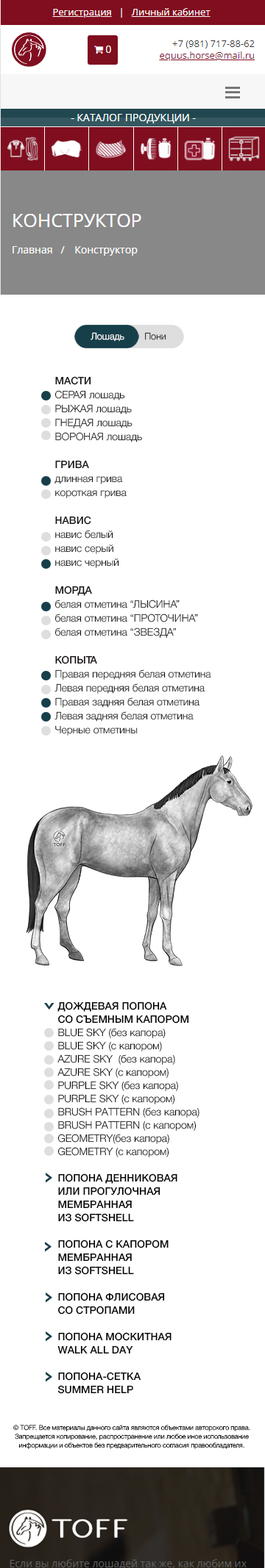
<style>
.page{position:relative;width:265px;height:1568px;background:#ffffff}
.page>*{position:absolute;margin:0}
.t1{font:9.4px "HelveticaNeueCyr-Light";color:#ffffff}
.t2{font:9.4px "HelveticaNeueCyr-Light";color:#282828}
.t3{font:10.3px/14px "HelveticaNeueCyr-Light";color:#161211}
.t4{font:10.3px/14px "HelveticaNeueCyr-Medium";color:#161211;text-transform:uppercase}
.t5{font:10.3px/14px "HelveticaNeueCyr-Light";color:#161211;text-transform:uppercase}
.t6{font:10.3px/14px "HelveticaNeueCyr-Medium";color:#161211}
.t7{font:10.3px/13.2px "HelveticaNeueCyr-Light";color:#010101}
.t8{font:10.3px/13.2px "HelveticaNeueCyr-Medium";color:#010101}
.t9{font:19.8px "Magistral-Medium";color:#163f4a;font-weight:bold;scale:0.67 1}
.t10{font:6.6px/8.8px "HelveticaNeueCyr-Light";color:#161211}
</style>
<div class="page">
<p class="t1" style="left:90px;top:332px;width:34px;height:10px">Лошадь</p>
<p class="t2" style="left:145px;top:332px;width:21px;height:8px">Пони</p>
<p class="t3" style="left:54px;top:376px;width:157px;height:360px"><span class="t4">Масти<br></span><span class="t5">серая</span> лошадь<br><span class="t5">рыжая</span> лошадь<br><span class="t5">гнедая</span> лошадь<br><span class="t5">вороная</span> лошадь<br><br><span class="t6">ГРИВА<br></span>длинная грива<br>короткая грива<br><br><span class="t4">Навис<br></span>навис белый<br>навис серый<br>навис черный<br><br><span class="t4">Морда<br></span>белая отметина “<span class="t5">лысина</span>”<br>белая отметина “<span class="t5">проточина</span>”<br>белая отметина “<span class="t5">звезда</span>”<br><br><span class="t4">Копыта<br></span>Правая передняя белая отметина<br>Левая передняя белая отметина<br>Правая задняя белая отметина<br>Левая задняя белая отметина<br>Черные отметины</p>
<p class="t7" style="left:57px;top:1001px;width:142px;height:393px"><span class="t8">ДОЖДЕВАЯ ПОПОНА<br>СО СЪЕМНЫМ КАПОРОМ<br></span>BLUE SKY (без капора)<br>BLUE SKY (с капором)<br>AZURE SKY  (без капора)<br>AZURE SKY (с капором) <br>PURPLE SKY (без капора)<br>PURPLE SKY (с капором)<br>BRUSH PATTERN (без капора)<br>BRUSH PATTERN (с капором)<br>GEOMETRY(без капора)<br>GEOMETRY (с капором)<br><br><span class="t8">ПОПОНА ДЕННИКОВАЯ<br>ИЛИ ПРОГУЛОЧНАЯ<br>МЕМБРАННАЯ <br>ИЗ SOFTSHELL<br>   <br>ПОПОНА С КАПОРОМ<br>МЕМБРАННАЯ <br>ИЗ SOFTSHELL<br><br>ПОПОНА ФЛИСОВАЯ<br>СО СТРОПАМИ<br><br>ПОПОНА МОСКИТНАЯ<br>WALK ALL DAY<br><br>ПОПОНА-СЕТКА<br>SUMMER HELP</span></p>
<p class="t9" style="left:44px;top:1003px;width:10px;height:7px;rotate:90deg">&gt;</p>
<p class="t9" style="left:46px;top:1173px;width:6px;height:10px">&gt;</p>
<p class="t9" style="left:45px;top:1242px;width:6px;height:10px">&gt;</p>
<p class="t9" style="left:46px;top:1292px;width:6px;height:11px">&gt;</p>
<p class="t9" style="left:46px;top:1331px;width:6px;height:11px">&gt;</p>
<p class="t9" style="left:46px;top:1372px;width:6px;height:10px">&gt;</p>
<p class="t10" style="left:13px;top:1425px;width:237px;height:24px;text-align:center">© TOFF. Все материалы данного сайта являются объектами авторского права. Запрещается копирование, распространение или любое иное использование информации и объектов без предварительного согласия правообладателя.</p>
</div>
